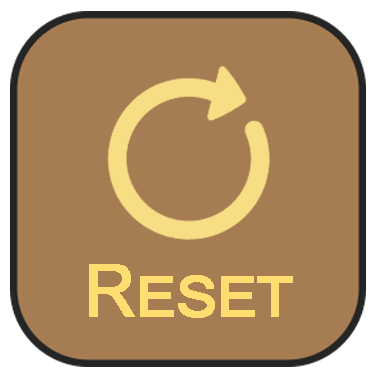
<style>
.page{position:relative;width:379px;height:379px;background:#a67c52}
.page>*{position:absolute;margin:0}
.t1{font:71.9px "ArialMT";letter-spacing:-0.025em;color:#fede70;font-variant:small-caps;font-weight:bold}
</style>
<div class="page">
<p class="t1" style="left:89px;top:264px;width:204px;height:54px">Reset</p>
</div>
